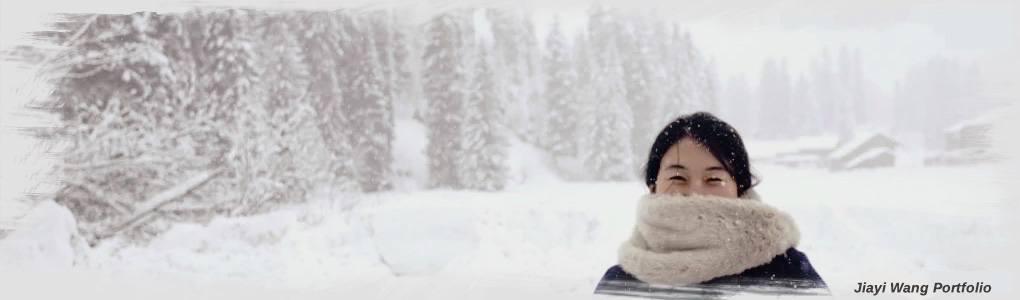
<style>
.page{position:relative;width:1020px;height:300px}
.page>*{position:absolute;margin:0}
.t1{font:14px "ArimoForPowerline-BoldItalic";color:#403c3c}
</style>
<div class="page">
<p class="t1" style="left:854px;top:282px;width:138px;height:14px">Jiayi Wang Portfolio</p>
</div>
